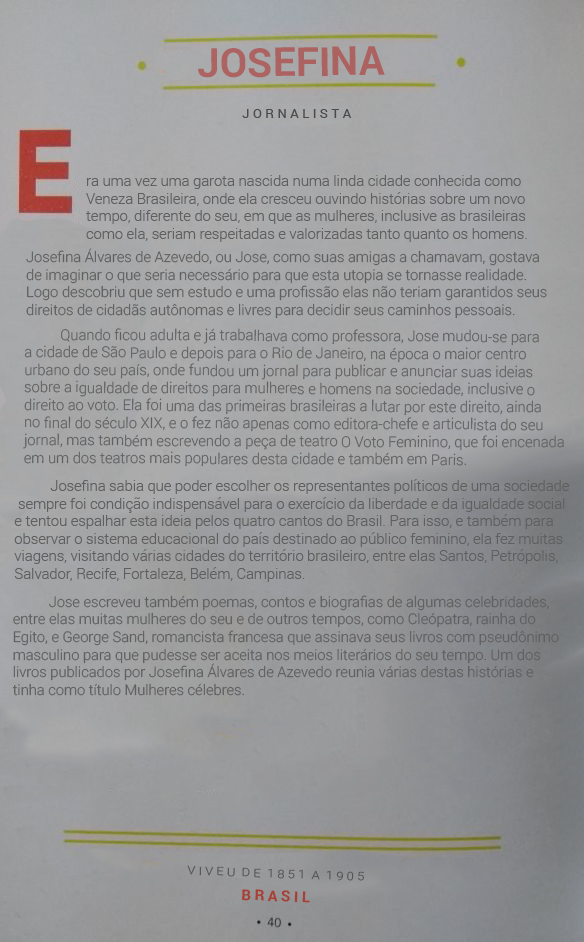
<style>
.page{position:relative;width:584px;height:942px}
.page>*{position:absolute;margin:0}
.t1{font:40px "Roboto-Bold";color:#ac6260}
.t2{font:13.3px "Roboto-Regular";color:#4c4c4c}
.t3{font:14.7px "Roboto-Light";color:#5f5f5f}
.t4{font:11.6px "Roboto-Light";color:#515253;scale:1.12 1}
.t5{font:14.7px "Roboto-Bold";color:#a93e34}
</style>
<div class="page">
<p class="t1" style="left:198px;top:46px;width:187px;height:32px;rotate:-1deg">JOSEFINA</p>
<p class="t2" style="left:242px;top:109px;width:110px;height:9px">J O R N A L I S T A</p>
<p class="t3" style="left:86px;top:175px;width:441px;height:67px">ra uma vez uma garota nascida numa linda cidade conhecida como <br>Veneza Brasileira, onde ela cresceu ouvindo histórias sobre um novo <br>tempo, diferente do seu, em que as mulheres, inclusive as brasileiras <br>como ela, seriam respeitadas e valorizadas tanto quanto os homens.</p>
<p class="t3" style="left:26px;top:248px;width:521px;height:71px">Josefina Álvares de Azevedo, ou Jose, como suas amigas a chamavam, gostava <br>de imaginar o que seria necessário para que esta utopia se tornasse realidade. <br>Logo descobriu que sem estudo e uma profissão elas não teriam garantidos seus <br>direitos de cidadãs autônomas e livres para decidir seus caminhos pessoais.</p>
<p class="t3" style="left:23px;top:328px;width:541px;height:139px">Quando ficou adulta e já trabalhava como professora, Jose mudou-se para <br>a cidade de São Paulo e depois para o Rio de Janeiro, na época o maior centro <br>urbano do seu país, onde fundou um jornal para publicar e anunciar suas ideias <br>sobre a igualdade de direitos para mulheres e homens na sociedade, inclusive o <br>direito ao voto. Ela foi uma das primeiras brasileiras a lutar por este direito, ainda <br>no final do século XIX, e o fez não apenas como editora-chefe e articulista do seu <br>jornal, mas também escrevendo a peça de teatro O Voto Feminino, que foi encenada <br>em um dos teatros mais populares desta cidade e também em Paris.</p>
<p class="t3" style="left:14px;top:479px;width:555px;height:103px">Josefina sabia que poder escolher os representantes políticos de uma sociedade<br> sempre foi condição indispensável para o exercício da liberdade e da igualdade social <br>e tentou espalhar esta ideia pelos quatro cantos do Brasil. Para isso, e também para <br>observar o sistema educacional do país destinado ao público feminino, ela fez muitas <br>viagens, visitando várias cidades do território brasileiro, entre elas Santos, Petrópolis, <br>Salvador, Recife, Fortaleza, Belém, Campinas.</p>
<p class="t3" style="left:12px;top:595px;width:547px;height:101px">Jose escreveu também poemas, contos e biografias de algumas celebridades, <br>entre elas muitas mulheres do seu e de outros tempos, como Cleópatra, rainha do <br>Egito, e George Sand, romancista francesa que assinava seus livros com pseudônimo <br>masculino para que pudesse ser aceita nos meios literários do seu tempo. Um dos <br>livros publicados por Josefina Álvares de Azevedo reunia várias destas histórias e <br>tinha como título Mulheres célebres.</p>
<p class="t4" style="left:187px;top:865px;width:177px;height:16px;rotate:2deg">V I V E U  D E  1 8 5 1  A  1 9 0 5</p>
<p class="t5" style="left:242px;top:889px;width:68px;height:14px;rotate:2deg">B R A S I L</p>
</div>
